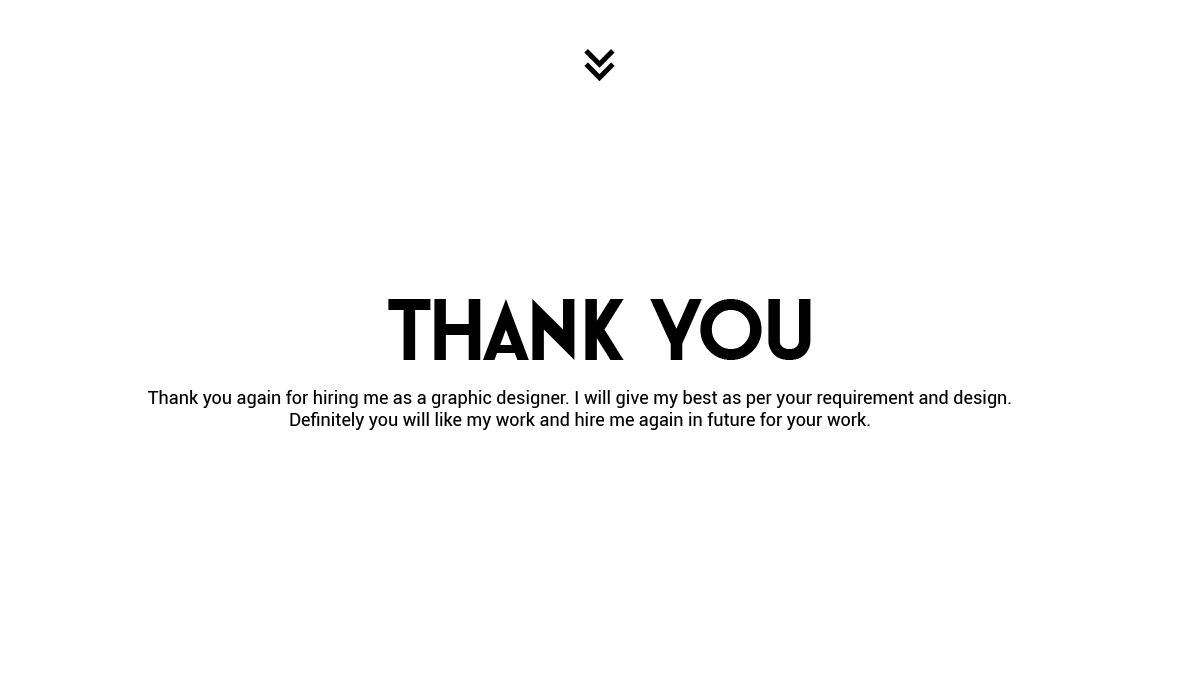
<style>
.page{position:relative;width:1200px;height:700px;background:#ffffff}
.page>*{position:absolute;margin:0}
.t1{font:90px "GeBody";color:#000000}
.t2{font:18px "Roboto-Regular";color:#000000}
</style>
<div class="page">
<p class="t1" style="left:388px;top:299px;width:423px;height:61px">thank you</p>
<p class="t2" style="left:148px;top:390px;width:863px;height:40px;text-align:center">Thank you again for hiring me as a graphic designer. I will give my best as per your requirement and design.<br>Definitely you will like my work and hire me again in future for your work.</p>
</div>
